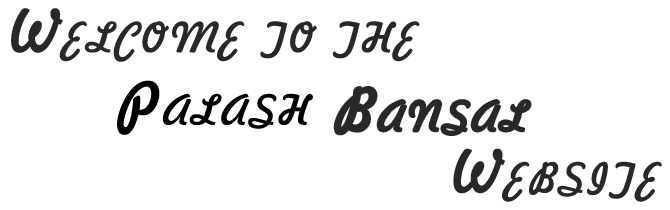
<style>
.page{position:relative;width:670px;height:210px;background:#ffffff}
.page>*{position:absolute;margin:0}
.t1{font:99.1px "Freehand521BT-RegularC";letter-spacing:0.05em;color:#282828;font-variant:small-caps}
.t2{font:99.1px "Freehand521BT-RegularC";letter-spacing:0.05em;color:#000000;font-variant:small-caps}
</style>
<div class="page">
<p class="t1" style="left:11px;top:8px;width:409px;height:54px">Welcome to the</p>
<p class="t2" style="left:117px;top:80px;width:196px;height:55px">Palash</p>
<p class="t1" style="left:334px;top:87px;width:197px;height:48px">Bansal</p>
<p class="t1" style="left:453px;top:148px;width:209px;height:54px">Website</p>
</div>
